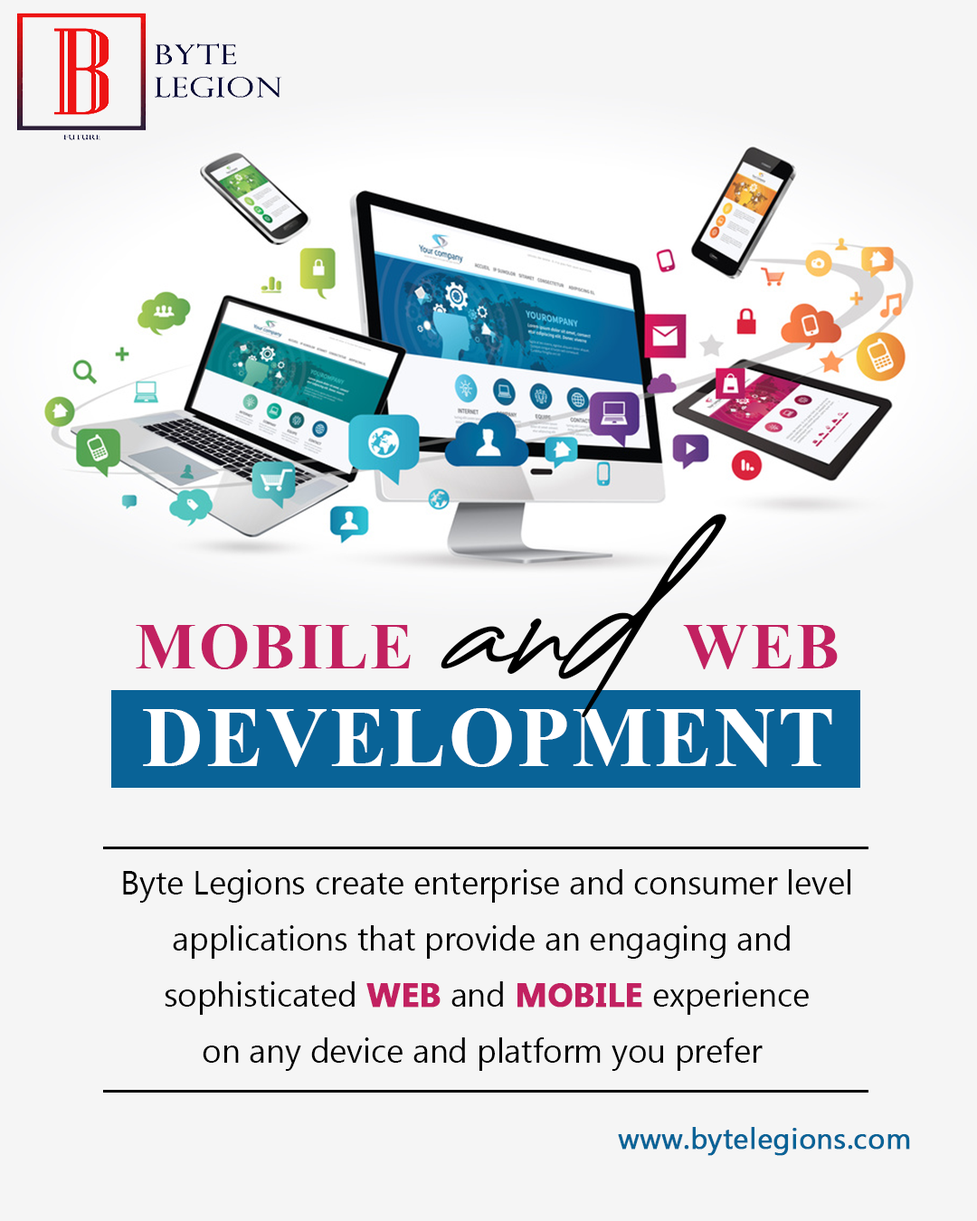
<style>
.page{position:relative;width:977px;height:1221px;background:#f5f5f5}
.page>*{position:absolute;margin:0}
.t1{font:65px "TimesNewRomanPS-BoldMT";color:#c22161;text-transform:uppercase}
.t2{font:275.3px "CreattionDemo";color:#000000}
.t3{font:84.6px "TimesNewRomanPS-BoldMT";color:#ffffff;text-transform:uppercase}
.t4{font:68.1px "TimesNewRomanPS-BoldMT";color:#b51e60;text-transform:uppercase}
.t5{font:33.2px/56.2px "MyanmarText";color:#000000}
.t6{font:33.2px/56.2px "MyanmarText-Bold";color:#c22161;text-transform:uppercase;font-weight:bold}
.t7{font:28.9px "MyanmarText";color:#096397;font-weight:bold}
</style>
<div class="page">
<p class="t1" style="left:136px;top:514px;width:701px;height:204px">Mobile  <span class="t2">and  </span>Web</p>
<p class="t3" style="left:143px;top:708px;width:689px;height:59px"><span class="t4"><br></span>Development</p>
<p class="t5" style="left:123px;top:869px;width:727px;height:202px;text-align:center">Byte Legions create enterprise and consumer level<br>applications that provide an engaging and <br>sophisticated <span class="t6">web</span> and <span class="t6">Mobile</span> experience<br>on any device and platform you prefer</p>
<p class="t7" style="left:618px;top:1127px;width:292px;height:29px">www.bytelegions.com</p>
</div>
